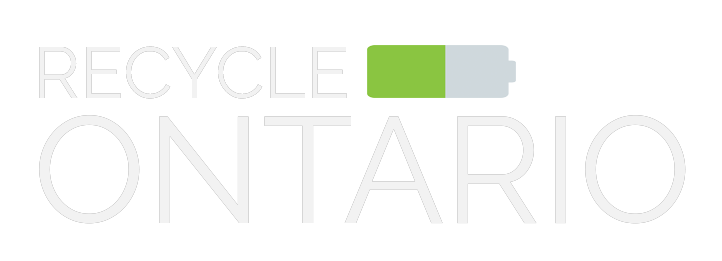
<style>
.page{position:relative;width:722px;height:261px;background:#ffffff}
.page>*{position:absolute;margin:0}
.t1{font:72px "Raleway-Regular";color:#f2f2f2}
.t2{font:150px "Raleway-Regular";color:#f2f2f2}
</style>
<div class="page">
<p class="t1" style="left:39px;top:46px;width:308px;height:53px">RECYCLE</p>
<p class="t1" style="left:39px;top:46px;width:308px;height:53px">RECYCLE</p>
<p class="t2" style="left:39px;top:115px;width:647px;height:109px">ONTARIO</p>
<p class="t2" style="left:39px;top:115px;width:647px;height:109px">ONTARIO</p>
</div>
